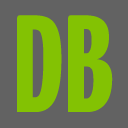
<style>
.page{position:relative;width:128px;height:128px;background:#626262}
.page>*{position:absolute;margin:0}
.t1{font:138px "YanoneKaffeesatz-Bold";color:#83c203}
</style>
<div class="page">
<p class="t1" style="left:17px;top:15px;width:96px;height:97px">DB</p>
</div>
